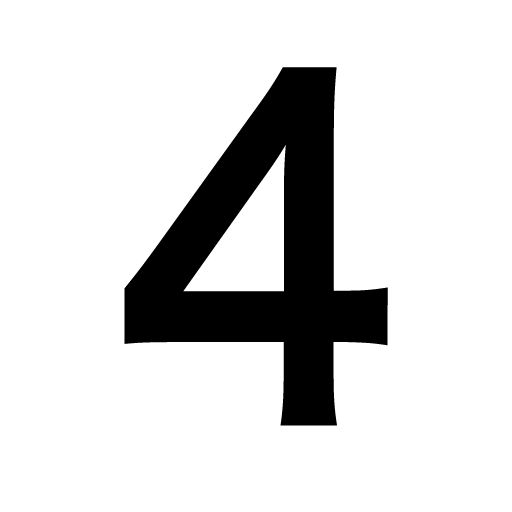
<style>
.page{position:relative;width:512px;height:512px;background:#ffffff}
.page>*{position:absolute;margin:0}
.t1{font:450px "HiraKakuPro-W6";color:#000000;scale:0.88 1}
</style>
<div class="page">
<p class="t1" style="left:124px;top:67px;width:264px;height:359px">4</p>
</div>
